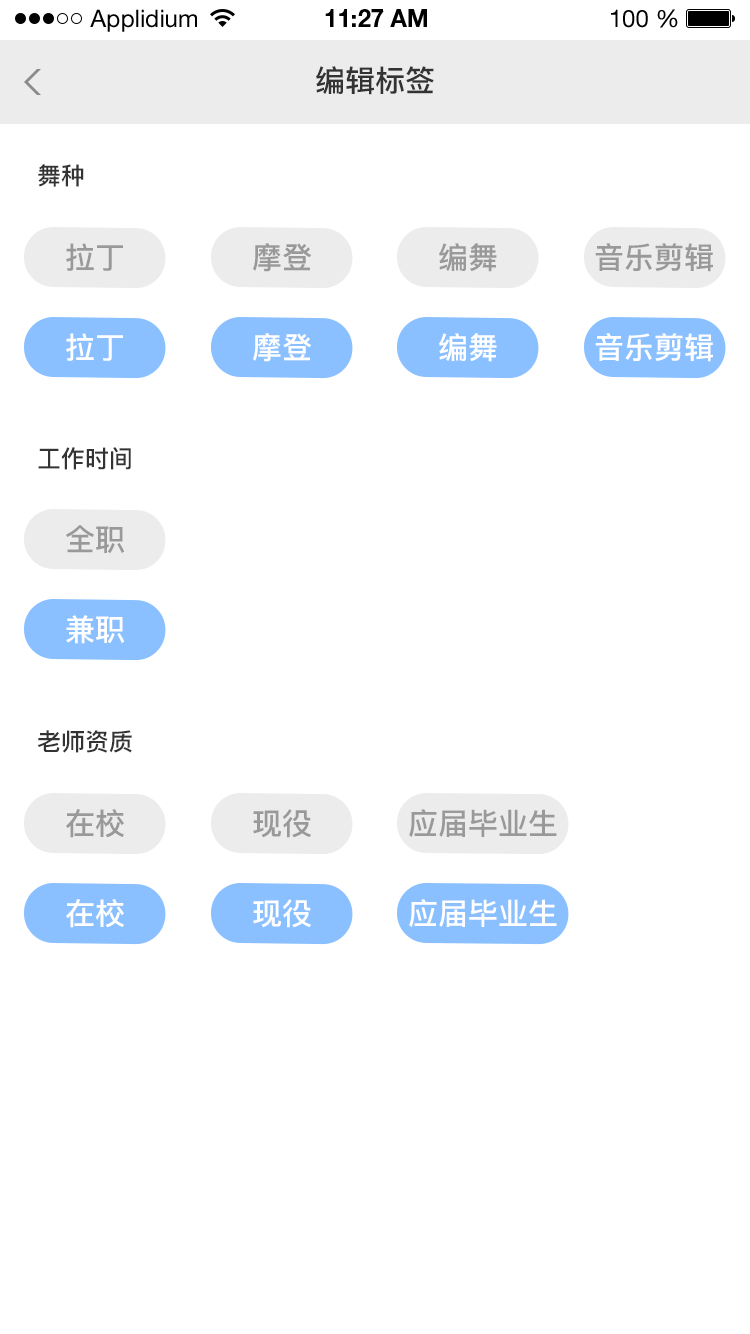
<style>
.page{position:relative;width:750px;height:1334px;background:#ffffff}
.page>*{position:absolute;margin:0}
.t1{font:24px "HelveticaNeueLTStd-Roman";color:#000000}
.t2{font:24px "HelveticaNeueLTStd-Bd";color:#000000}
.t3{font:30px "PingFang-SC-Bold";color:#333333}
.t4{font:24px "PingFang-SC-Bold";color:#333333}
.t5{font:30px "PingFang-SC-Bold";color:#999999}
.t6{font:30px "PingFang-SC-Bold";color:#ffffff}
</style>
<div class="page">
<p class="t1" style="left:90px;top:9px;width:107px;height:23px">Applidium</p>
<p class="t2" style="left:325px;top:9px;width:102px;height:18px">11:27 AM</p>
<p class="t1" style="left:611px;top:9px;width:67px;height:19px">100 %</p>
<p class="t3" style="left:316px;top:66px;width:118px;height:29px">编辑标签</p>
<p class="t4" style="left:38px;top:164px;width:46px;height:23px">舞种</p>
<p class="t5" style="left:66px;top:243px;width:57px;height:28px">拉丁</p>
<p class="t5" style="left:253px;top:243px;width:59px;height:29px">摩登</p>
<p class="t5" style="left:439px;top:243px;width:58px;height:29px">编舞</p>
<p class="t5" style="left:595px;top:243px;width:118px;height:29px">音乐剪辑</p>
<p class="t6" style="left:66px;top:333px;width:57px;height:28px">拉丁</p>
<p class="t6" style="left:253px;top:333px;width:59px;height:29px">摩登</p>
<p class="t6" style="left:439px;top:333px;width:58px;height:29px">编舞</p>
<p class="t6" style="left:595px;top:333px;width:118px;height:29px">音乐剪辑</p>
<p class="t4" style="left:38px;top:447px;width:93px;height:23px">工作时间</p>
<p class="t5" style="left:66px;top:525px;width:59px;height:29px">全职</p>
<p class="t6" style="left:66px;top:615px;width:59px;height:29px">兼职</p>
<p class="t4" style="left:38px;top:730px;width:94px;height:23px">老师资质</p>
<p class="t5" style="left:66px;top:809px;width:58px;height:29px">在校</p>
<p class="t5" style="left:253px;top:809px;width:58px;height:29px">现役</p>
<p class="t5" style="left:409px;top:809px;width:148px;height:28px">应届毕业生</p>
<p class="t6" style="left:66px;top:899px;width:58px;height:29px">在校</p>
<p class="t6" style="left:253px;top:899px;width:58px;height:29px">现役</p>
<p class="t6" style="left:409px;top:899px;width:148px;height:28px">应届毕业生</p>
</div>
